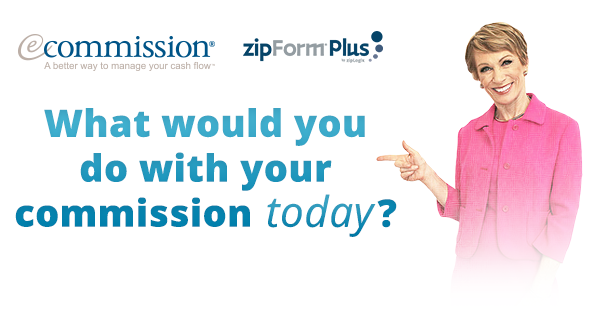
<style>
.page{position:relative;width:600px;height:320px;background:#ffffff}
.page>*{position:absolute;margin:0}
.t1{font:37.4px "OpenSans-Extrabold";letter-spacing:-0.01em;font-weight:bold}
.t2{font:42px "OpenSans-Italic";letter-spacing:-0.01em;color:#2092b7;font-weight:bold}
</style>
<div class="page">
<p class="t1" style="left:15px;top:108px;width:382px;height:128px;text-align:center">What would you<br>do with your<br>commission today?</p>
<p class="t2" style="left:267px;top:194px;width:109px;height:43px">today</p>
</div>
